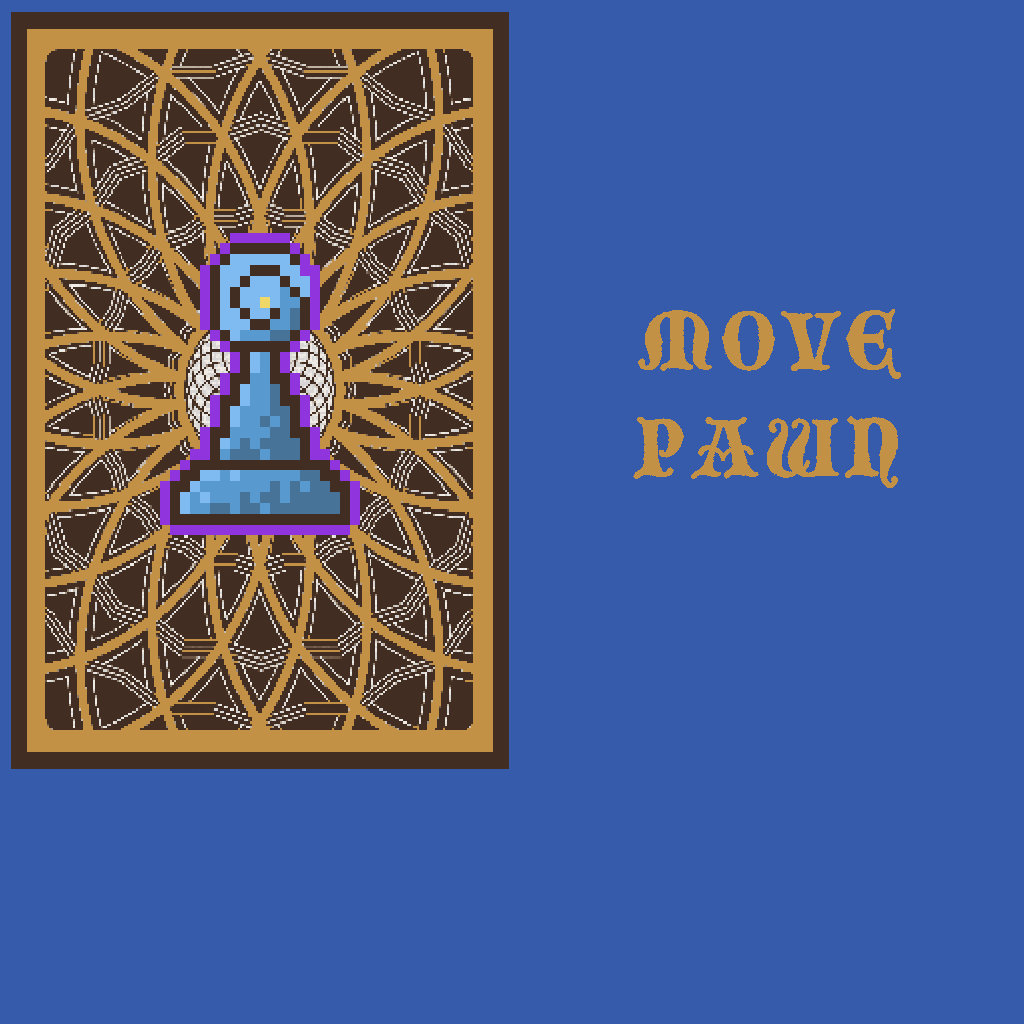
<style>
.page{position:relative;width:1024px;height:1024px;background:#355baa}
.page>*{position:absolute;margin:0}
.t1{font:88.9px "BlackmoorLetPlain";letter-spacing:0.05em;color:#c39146}
</style>
<div class="page">
<p class="t1" style="left:633px;top:309px;width:268px;height:179px;text-align:center">MOVE<br>PAWN</p>
</div>
